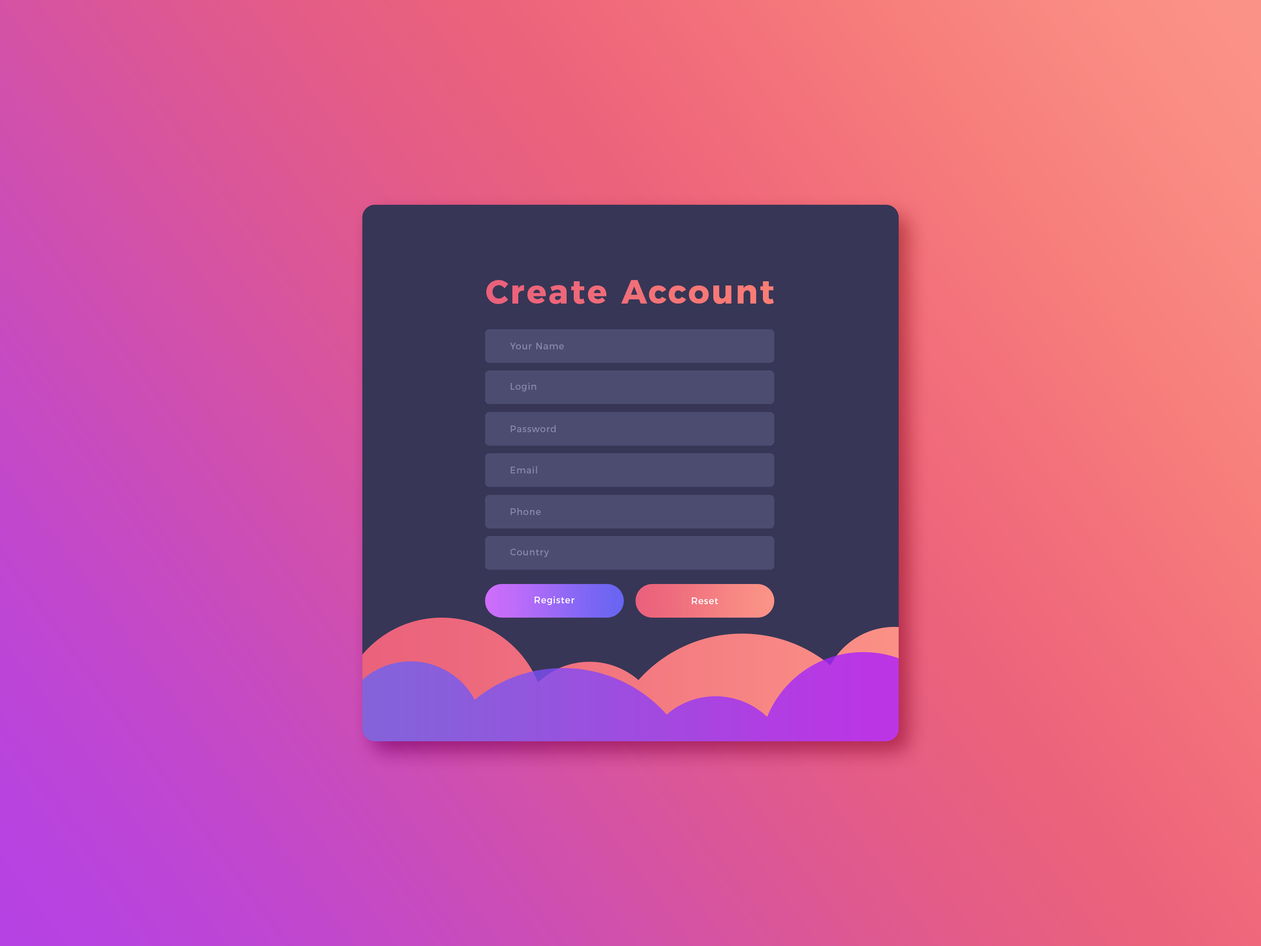
<style>
.page{position:relative;width:1261px;height:946px}
.page>*{position:absolute;margin:0}
.t1{font:33.3px "Montserrat-Bold";letter-spacing:0.06em;color:#f27078}
.t2{font:9.3px "Montserrat-Regular";letter-spacing:0.06em;color:#8585ae;scale:0.96 1}
.t3{font:9.3px "Montserrat-Regular";letter-spacing:0.06em;color:#ffffff;scale:0.96 1}
</style>
<div class="page">
<p class="t1" style="left:486px;top:280px;width:288px;height:24px">Create Account</p>
<p class="t2" style="left:510px;top:343px;width:54px;height:6px">Your Name</p>
<p class="t2" style="left:511px;top:382px;width:25px;height:9px">Login</p>
<p class="t2" style="left:511px;top:425px;width:45px;height:7px">Password</p>
<p class="t2" style="left:511px;top:466px;width:26px;height:7px">Email</p>
<p class="t2" style="left:511px;top:508px;width:30px;height:7px">Phone</p>
<p class="t2" style="left:510px;top:548px;width:39px;height:9px">Country</p>
<p class="t3" style="left:535px;top:596px;width:40px;height:9px">Register</p>
<p class="t3" style="left:692px;top:597px;width:26px;height:7px">Reset</p>
</div>
